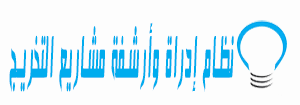
<style>
.page{position:relative;width:300px;height:105px;background:#fdfdfd}
.page>*{position:absolute;margin:0}
.t1{font:71.3px "HacenSamra";letter-spacing:0.1em;color:#00acee;scale:0.22 1}
</style>
<div class="page">
<p class="t1" style="left:9px;top:22px;width:225px;height:70px">نظام إدراة وأرشفة مشاريع التخريج</p>
</div>
